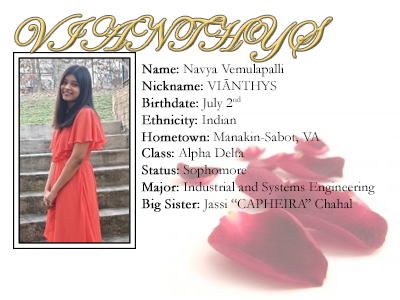
<style>
.page{position:relative;width:400px;height:300px;background:#ffffff}
.page>*{position:absolute;margin:0}
.t1{font:48px "EdwardianScriptITC";text-transform:uppercase;font-weight:bold}
.t2{font:14px "Garamond";color:#000000}
.t3{font:14px "Garamond";color:#000000;font-weight:bold}
.t4{font:14px "Garamond";color:#000000;text-transform:uppercase}
</style>
<div class="page">
<p class="t1" style="left:15px;top:14px;width:317px;height:48px">Vianthys</p>
<p class="t2" style="left:141px;top:63px;width:234px;height:149px"><span class="t3">Name:</span> Navya Vemulapalli<br><span class="t3">Nickname: </span><span class="t4">VIānthys<br></span><span class="t3">Birthdate:</span> July 2nd<br><span class="t3">Ethnicity:</span> Indian<br><span class="t3">Hometown:</span> Manakin-Sabot, VA<br><span class="t3">Class:</span> Alpha Delta<br><span class="t3">Status:</span> Sophomore<br><span class="t3">Major:</span> Industrial and Systems Engineering<br><span class="t3">Big Sister: </span>Jassi “CAPHEIRA” Chahal</p>
</div>
